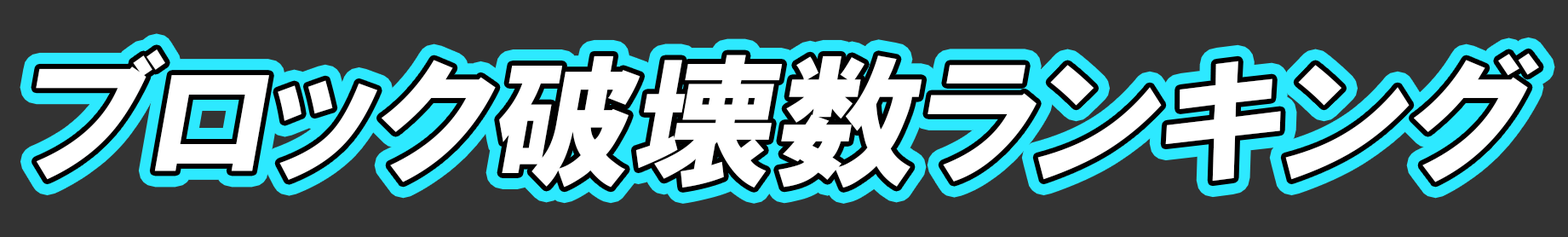
<style>
.page{position:relative;width:1568px;height:237px;background:#333333}
.page>*{position:absolute;margin:0}
.t1{font:142px "HGPSoeiKakugothicUB";color:#ffffff;font-style:italic}
</style>
<div class="page">
<p class="t1" style="left:36px;top:49px;width:1503px;height:138px">ブロック破壊数ランキング</p>
</div>
